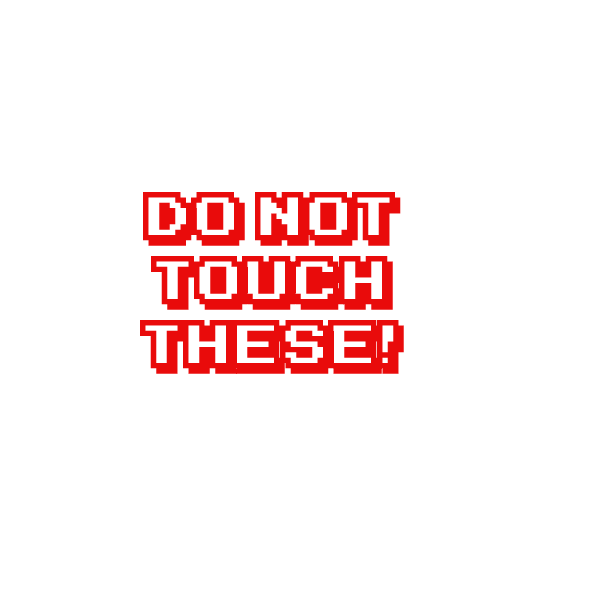
<style>
.page{position:relative;width:600px;height:600px;background:#ffffff}
.page>*{position:absolute;margin:0}
.t1{font:55px/64px "KarmaticArcade";color:#e90b0b}
</style>
<div class="page">
<p class="t1" style="left:140px;top:192px;width:264px;height:182px;text-align:center">DO NOT<br>touch<br>these!</p>
</div>
